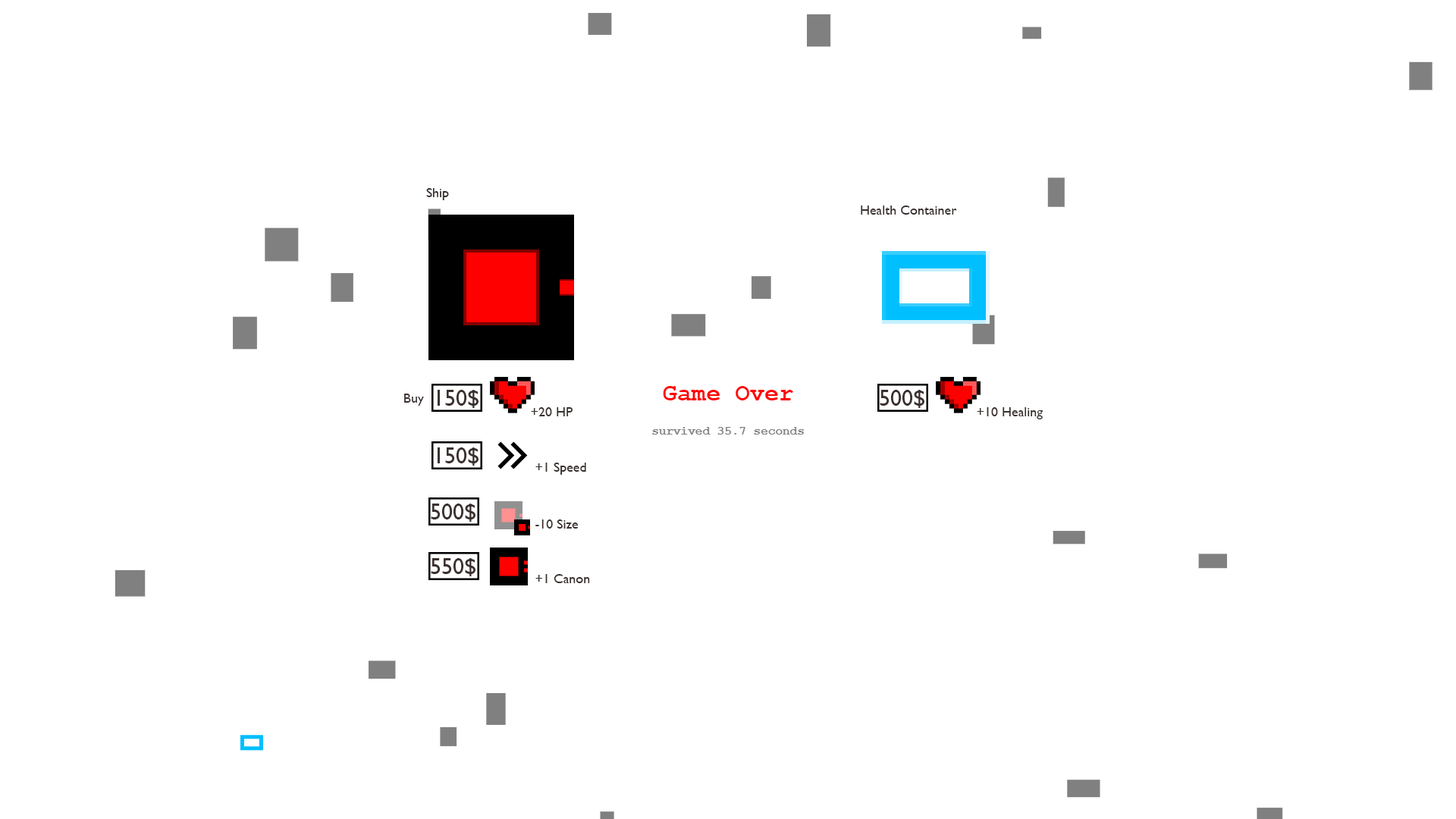
<style>
.page{position:relative;width:1456px;height:819px;background:#ffffff}
.page>*{position:absolute;margin:0}
.t1{font:13.6px "GillSansMT";color:#3a312f}
.t2{font:22.7px "GillSansMT";color:#3a312f}
</style>
<div class="page">
<p class="t1" style="left:426px;top:188px;width:23px;height:12px">Ship</p>
<p class="t1" style="left:861px;top:206px;width:96px;height:9px">Health Container</p>
<p class="t2" style="left:438px;top:390px;width:41px;height:18px">150$</p>
<p class="t2" style="left:880px;top:390px;width:44px;height:18px">500$</p>
<p class="t1" style="left:404px;top:394px;width:20px;height:12px">Buy</p>
<p class="t1" style="left:531px;top:407px;width:42px;height:9px">+20 HP</p>
<p class="t1" style="left:977px;top:407px;width:66px;height:12px">+10 Healing</p>
<p class="t2" style="left:438px;top:447px;width:41px;height:19px">150$</p>
<p class="t1" style="left:535px;top:463px;width:51px;height:12px">+1 Speed</p>
<p class="t2" style="left:431px;top:504px;width:44px;height:18px">500$</p>
<p class="t1" style="left:535px;top:519px;width:44px;height:10px">-10 Size</p>
<p class="t2" style="left:431px;top:558px;width:44px;height:18px">550$</p>
<p class="t1" style="left:535px;top:574px;width:55px;height:9px">+1 Canon</p>
</div>
